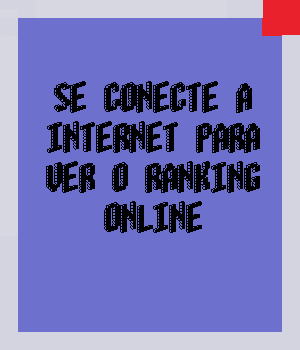
<style>
.page{position:relative;width:300px;height:350px;background:#6d71cd}
.page>*{position:absolute;margin:0}
.t1{font:33.3px "Blox-(BRK";color:#010101}
</style>
<div class="page">
<p class="t1" style="left:46px;top:81px;width:214px;height:152px;text-align:center">se conecte a internet para ver o ranking online</p>
</div>
